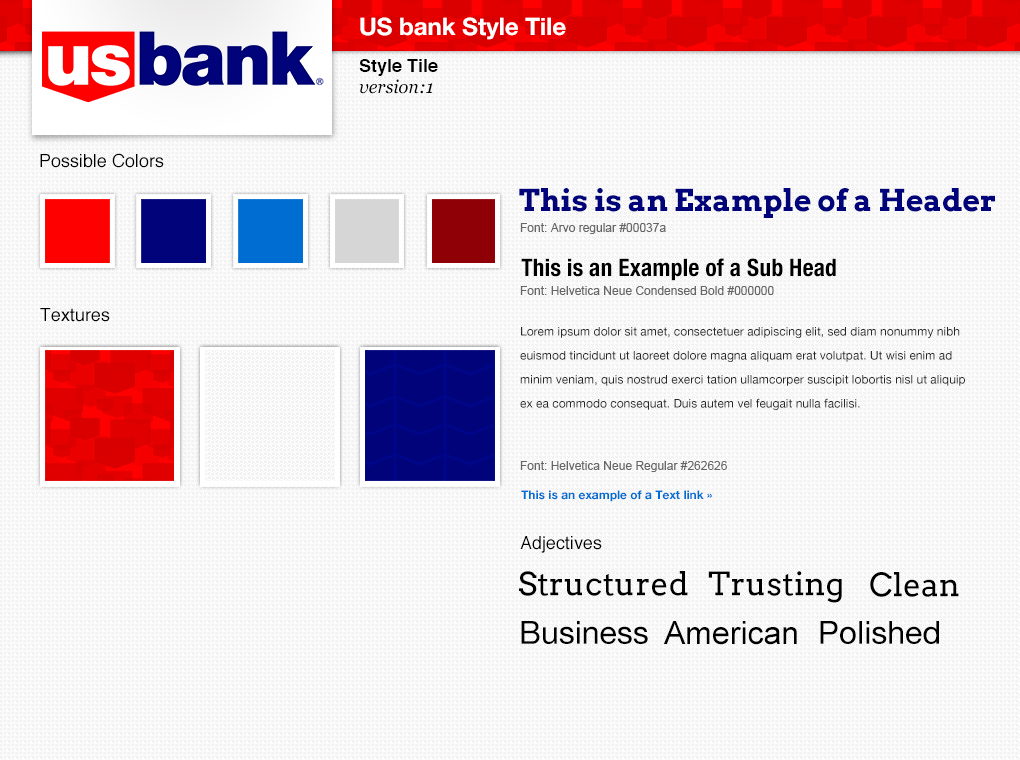
<style>
.page{position:relative;width:1020px;height:760px;background:#ffffff}
.page>*{position:absolute;margin:0}
.t1{font:24px "HelveticaNeue-Bold";color:#ffffff}
.t2{font:18px "Helvetica-Bold";color:#000000}
.t3{font:18px "Georgia-Italic";color:#000000}
.t4{font:18px "Helvetica";color:#000000}
.t5{font:30px "Arvo-Bold";color:#00037a}
.t6{font:12px "ArialMT";color:#666666}
.t7{font:24px "HelveticaNeue-CondensedBold";color:#000000}
.t8{font:12px/24px "HelveticaNeue";color:#272727}
.t9{font:12px "HelveticaNeue-Bold";color:#006dd3}
.t10{font:32px "Arvo";color:#000000}
.t11{font:32px "HelveticaNeue";color:#000000}
.t12{font:32px "ArialMT";color:#000000}
</style>
<div class="page">
<p class="t1" style="left:360px;top:17px;width:206px;height:23px">US bank Style Tile</p>
<p class="t2" style="left:359px;top:59px;width:79px;height:17px">Style Tile</p>
<p class="t3" style="left:359px;top:79px;width:74px;height:15px">version:1</p>
<p class="t4" style="left:40px;top:153px;width:124px;height:15px">Possible Colors</p>
<p class="t5" style="left:519px;top:188px;width:476px;height:30px">This is an Example of a Header</p>
<p class="t6" style="left:520px;top:223px;width:146px;height:11px">Font: Arvo regular #00037a</p>
<p class="t7" style="left:521px;top:258px;width:315px;height:23px">This is an Example of a Sub Head</p>
<p class="t6" style="left:520px;top:286px;width:254px;height:9px">Font: Helvetica Neue Condensed Bold #000000</p>
<p class="t4" style="left:40px;top:308px;width:70px;height:14px">Textures</p>
<p class="t8" style="left:520px;top:327px;width:445px;height:83px">Lorem ipsum dolor sit amet, consectetuer adipiscing elit, sed diam nonummy nibh euismod tincidunt ut laoreet dolore magna aliquam erat volutpat. Ut wisi enim ad minim veniam, quis nostrud exerci tation ullamcorper suscipit lobortis nisl ut aliquip ex ea commodo consequat. Duis autem vel feugait nulla facilisi.</p>
<p class="t6" style="left:520px;top:461px;width:207px;height:11px">Font: Helvetica Neue Regular #262626</p>
<p class="t9" style="left:521px;top:490px;width:191px;height:12px">This is an example of a Text link »</p>
<p class="t4" style="left:520px;top:536px;width:82px;height:17px">Adjectives</p>
<p class="t10" style="left:519px;top:571px;width:169px;height:25px">Structured</p>
<p class="t10" style="left:708px;top:571px;width:134px;height:32px">Trusting</p>
<p class="t10" style="left:870px;top:572px;width:89px;height:25px">Clean</p>
<p class="t11" style="left:521px;top:621px;width:127px;height:23px">Business</p>
<p class="t12" style="left:663px;top:621px;width:134px;height:24px">American</p>
<p class="t11" style="left:820px;top:621px;width:119px;height:23px">Polished</p>
</div>
